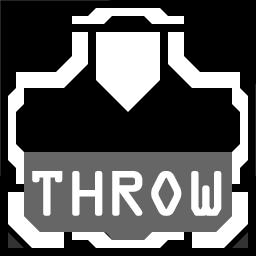
<style>
.page{position:relative;width:256px;height:256px;background:#000000}
.page>*{position:absolute;margin:0}
.t1{font:56.8px "OCRAStd";letter-spacing:-0.05em;color:#ffffff;text-transform:uppercase;font-weight:bold}
</style>
<div class="page">
<p class="t1" style="left:32px;top:171px;width:190px;height:45px">THROW</p>
</div>
